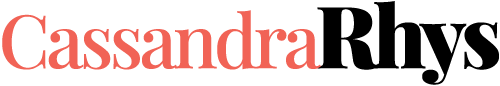
<style>
.page{position:relative;width:500px;height:86px;background:#ffffff}
.page>*{position:absolute;margin:0}
.t1{font:86px "PlayfairDisplay-Black";letter-spacing:-0.05em;color:#000000}
.t2{font:74px "PlayfairDisplay-Medium";letter-spacing:-0.05em;color:#f16356}
</style>
<div class="page">
<p class="t1" style="left:317px;top:1px;width:182px;height:84px">Rhys</p>
<p class="t2" style="left:2px;top:10px;width:319px;height:60px">Cassandra</p>
</div>
